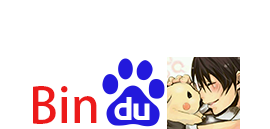
<style>
.page{position:relative;width:270px;height:129px;background:#ffffff}
.page>*{position:absolute;margin:0}
.t1{font:48px "AdobeHeitiStd-Regular";color:#ec1a1a}
</style>
<div class="page">
<p class="t1" style="left:33px;top:86px;width:64px;height:38px">Bin</p>
</div>
